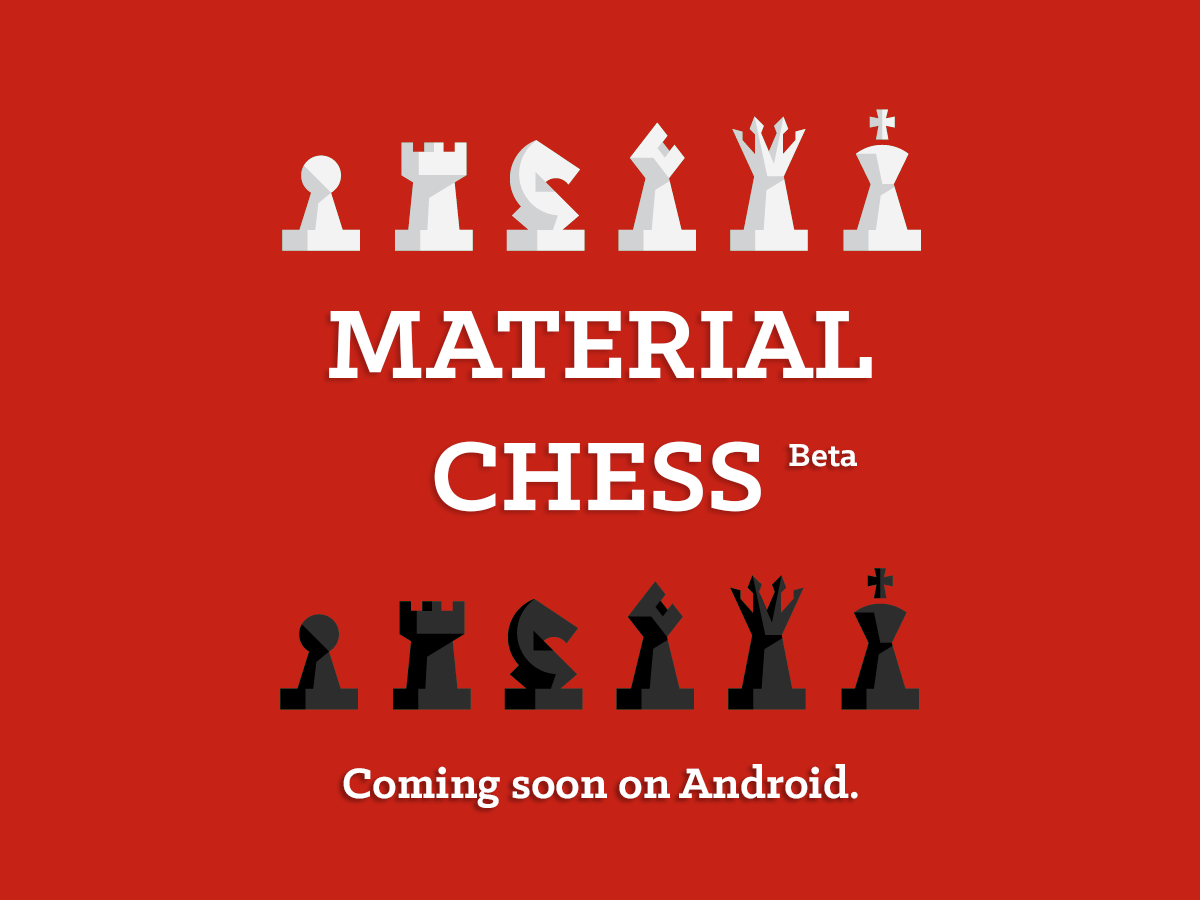
<style>
.page{position:relative;width:1200px;height:900px;background:#c72216}
.page>*{position:absolute;margin:0}
.t1{font:110px "KlinicSlab-Bold";color:#ffffff}
.t2{font:36px "KlinicSlab-Bold";color:#ffffff}
.t3{font:48px "KlinicSlab-Bold";color:#ffffff}
</style>
<div class="page">
<p class="t1" style="left:329px;top:311px;width:543px;height:201px;text-align:center">MATERIAL<br>CHESS</p>
<p class="t2" style="left:789px;top:444px;width:68px;height:23px">Beta</p>
<p class="t3" style="left:343px;top:764px;width:515px;height:44px">Coming soon on Android.</p>
</div>
